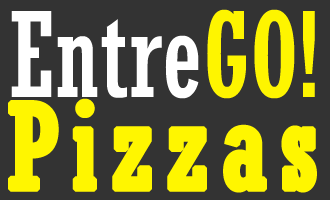
<style>
.page{position:relative;width:330px;height:200px;background:#333333}
.page>*{position:absolute;margin:0}
.t1{font:117px "Rockwell-Condensed";color:#ffffff}
.t2{font:117px "Rockwell-Condensed";color:#fef500}
.t3{font:117px "Rockwell-Condensed";letter-spacing:0.1em;color:#fff600;font-weight:bold}
</style>
<div class="page">
<p class="t1" style="left:11px;top:9px;width:304px;height:90px">Entre<span class="t2">GO!</span></p>
<p class="t3" style="left:8px;top:98px;width:309px;height:95px">Pizzas</p>
</div>
